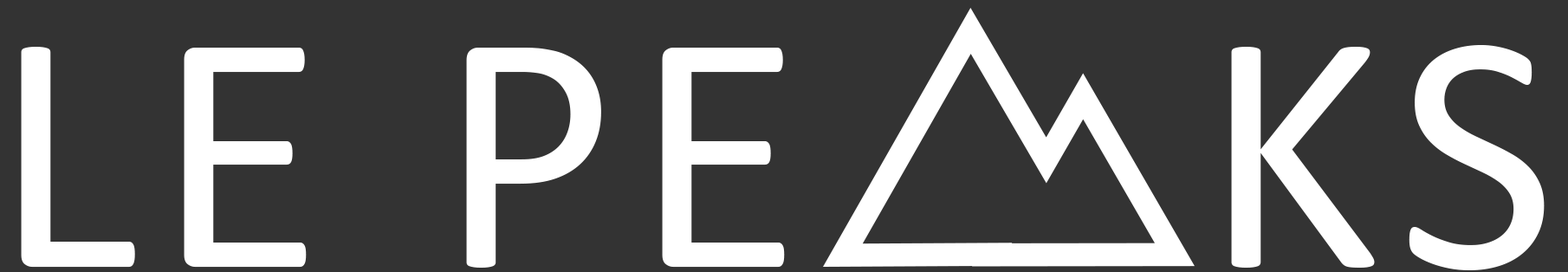
<style>
.page{position:relative;width:1568px;height:272px;background:#333333}
.page>*{position:absolute;margin:0}
.t1{font:346.5px "Calibri";letter-spacing:0.05em;color:#ffffff}
</style>
<div class="page">
<p class="t1" style="left:21px;top:45px;width:1524px;height:225px">LE PE    KS</p>
</div>
